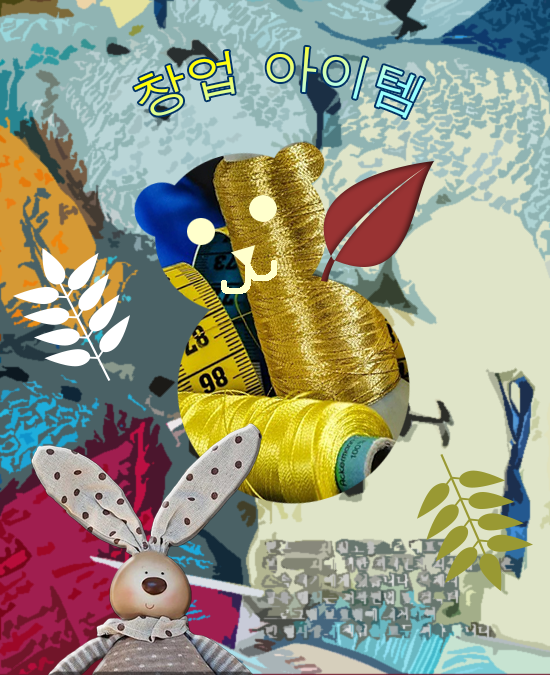
<style>
.page{position:relative;width:550px;height:675px}
.page>*{position:absolute;margin:0}
.t1{font:50px "Dotum"}
</style>
<div class="page">
<p class="t1" style="left:134px;top:46px;width:291px;height:73px">창업 아이템</p>
</div>
